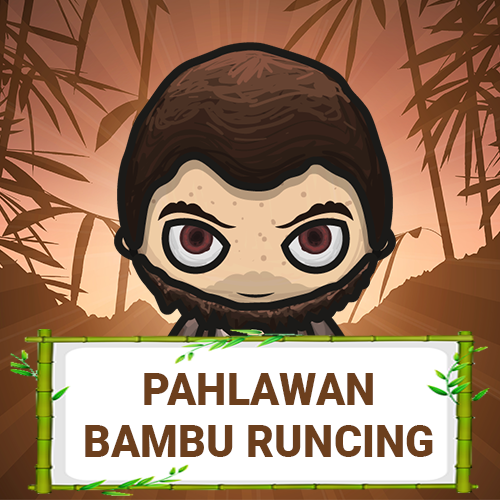
<style>
.page{position:relative;width:500px;height:500px}
.page>*{position:absolute;margin:0}
.t1{font:43.8px "Roboto-Black";color:#6c3f1d}
</style>
<div class="page">
<p class="t1" style="left:85px;top:373px;width:348px;height:84px;text-align:center">PAHLAWAN<br>BAMBU RUNCING</p>
</div>
